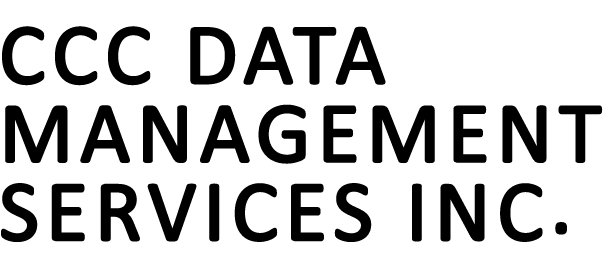
<style>
.page{position:relative;width:608px;height:275px;background:#ffffff}
.page>*{position:absolute;margin:0}
.t1{font:86.8px/78.4px "Calibri";letter-spacing:0.05em;color:#000000;font-weight:bold}
</style>
<div class="page">
<p class="t1" style="left:1px;top:26px;width:602px;height:216px">CCC DATA<br>MANAGEMENT<br>SERVICES INC.</p>
</div>
